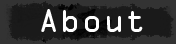
<style>
.page{position:relative;width:176px;height:44px;background:#1a1a1a}
.page>*{position:absolute;margin:0}
.t1{font:30px "OCRAStd";color:#ffffff}
</style>
<div class="page">
<p class="t1" style="left:41px;top:9px;width:102px;height:23px">About</p>
</div>
